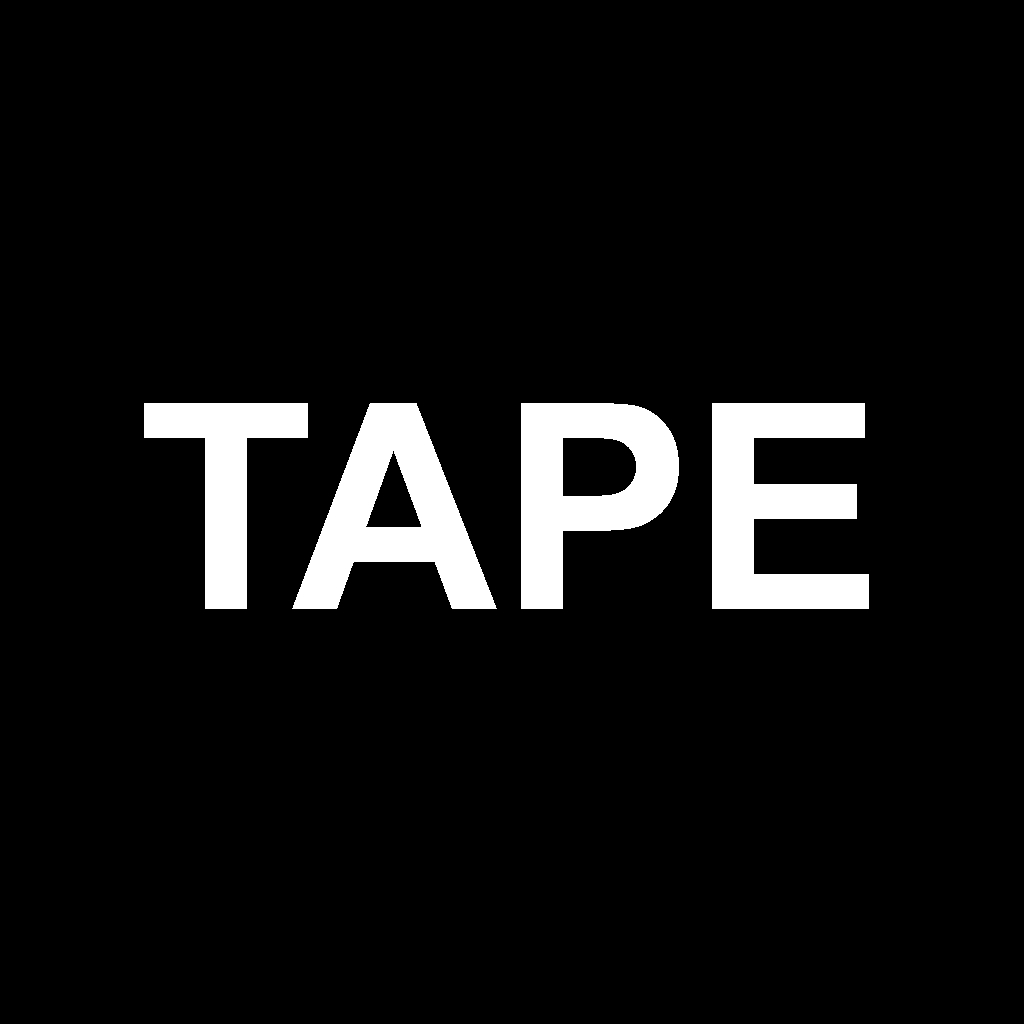
<style>
.page{position:relative;width:1024px;height:1024px;background:#000000}
.page>*{position:absolute;margin:0}
.t1{font:287.5px "Arial-BoldMT";color:#ffffff}
</style>
<div class="page">
<p class="t1" style="left:144px;top:403px;width:725px;height:206px">TAPE</p>
</div>
